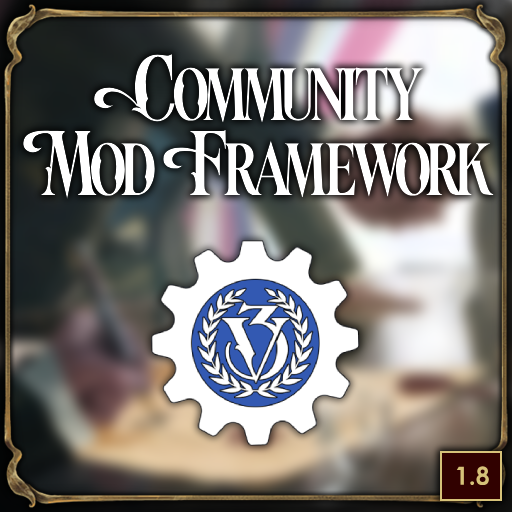
<style>
.page{position:relative;width:512px;height:512px}
.page>*{position:absolute;margin:0}
.t1{font:103.5px/68.3px "ParadoxVictorian-Condensed";letter-spacing:-0.04em;color:#ffffff}
.t2{font:25px "CenturyGothic-Bold";color:#d6c279}
</style>
<div class="page">
<p class="t1" style="left:22px;top:54px;width:472px;height:146px;text-align:center">Community<br>Mod Framework</p>
<p class="t2" style="left:456px;top:466px;width:33px;height:20px">1.8</p>
</div>
